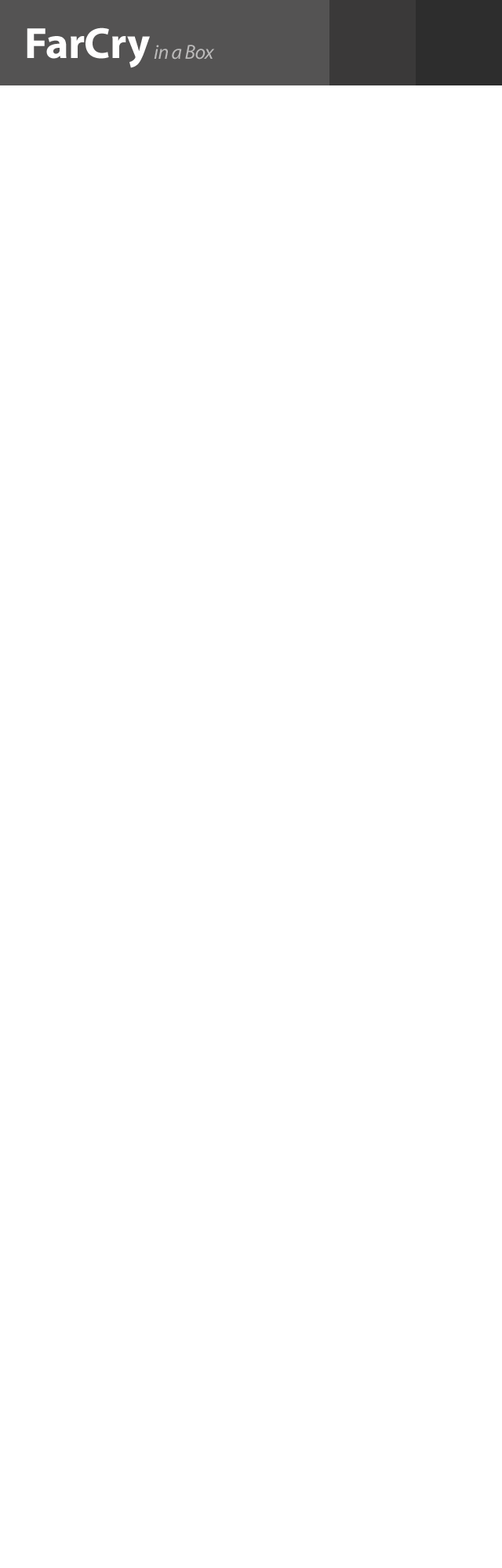
<style>
.page{position:relative;width:502px;height:1568px;background:#ffffff}
.page>*{position:absolute;margin:0}
.t1{font:43.9px "MyriadPro-Bold";letter-spacing:-0.01em;color:#ffffff}
.t2{font:20.4px "MyriadPro-It";letter-spacing:-0.025em;color:#bbbaba}
</style>
<div class="page">
<p class="t1" style="left:27px;top:27px;width:123px;height:41px">FarCry</p>
<p class="t2" style="left:154px;top:45px;width:61px;height:15px">in a Box</p>
</div>
